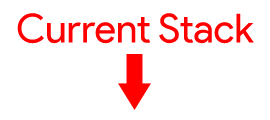
<style>
.page{position:relative;width:270px;height:120px;background:#ffffff}
.page>*{position:absolute;margin:0}
.t1{font:40px "ProductSans-Regular";color:#ff0000}
</style>
<div class="page">
<p class="t1" style="left:17px;top:13px;width:237px;height:31px">Current Stack</p>
</div>
